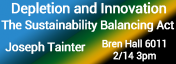
<style>
.page{position:relative;width:176px;height:64px}
.page>*{position:absolute;margin:0}
.t1{font:14px "Roboto-Regular";letter-spacing:-0.03em;color:#ffffff;font-weight:bold}
.t2{font:12px "Roboto-Regular";letter-spacing:-0.03em;color:#ffffff;font-weight:bold}
.t3{font:10px "Roboto-Regular";letter-spacing:-0.03em;color:#ffffff;font-weight:bold}
</style>
<div class="page">
<p class="t1" style="left:11px;top:2px;width:156px;height:15px">Depletion and Innovation</p>
<p class="t2" style="left:1px;top:19px;width:174px;height:13px">The Sustainability Balancing Act</p>
<p class="t2" style="left:5px;top:41px;width:81px;height:13px">Joseph Tainter</p>
<p class="t3" style="left:102px;top:39px;width:64px;height:23px;text-align:center">Bren Hall 6011<br>2/14 3pm</p>
</div>
